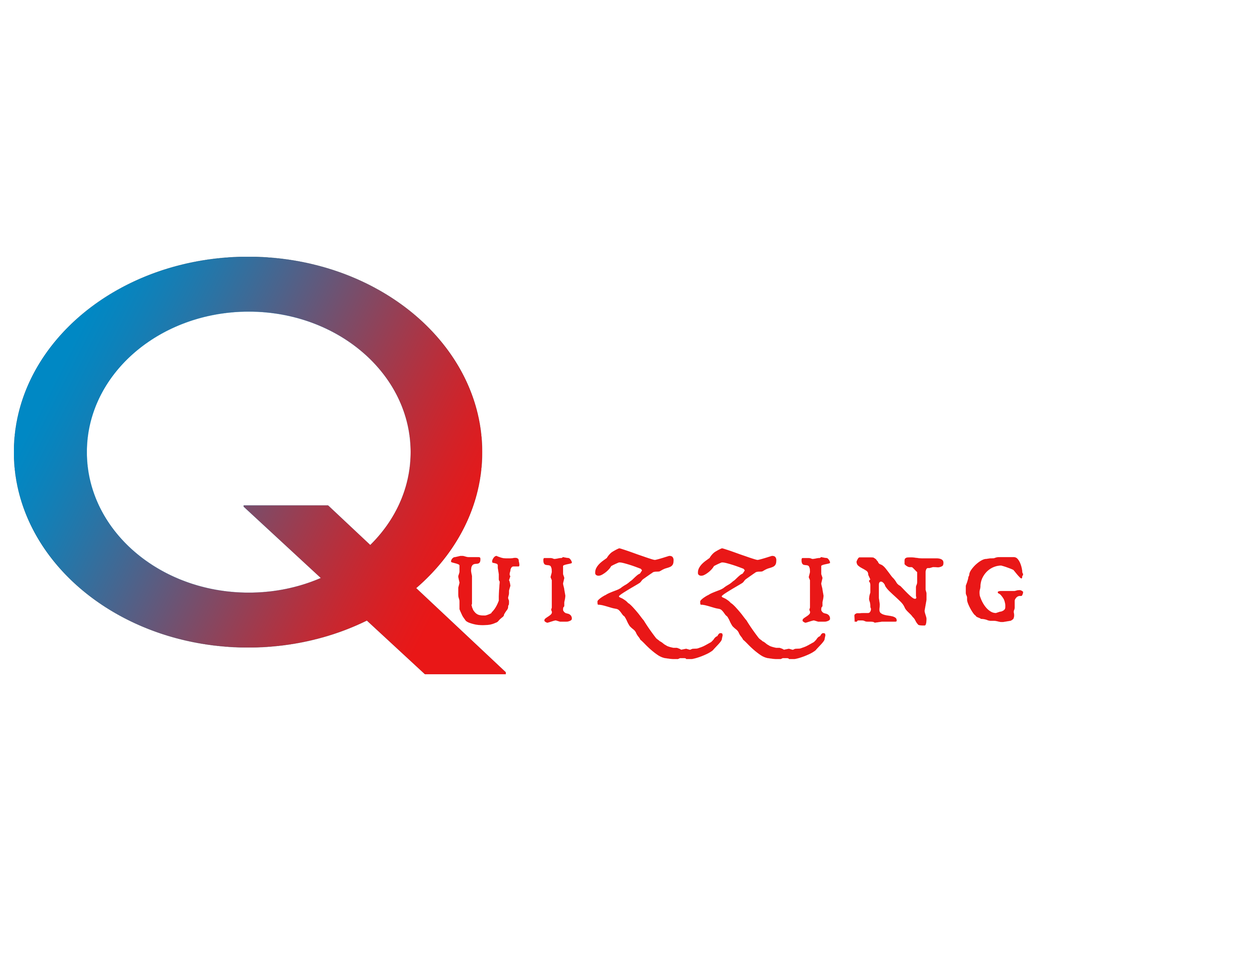
<style>
.page{position:relative;width:1242px;height:960px;background:#ffffff}
.page>*{position:absolute;margin:0}
.t1{font:112.9px "Trattatello";letter-spacing:0.18em;color:#e91717;text-transform:uppercase}
</style>
<div class="page">
<p class="t1" style="left:451px;top:548px;width:573px;height:111px">uizzing</p>
</div>
